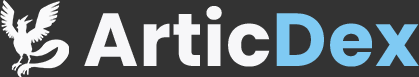
<style>
.page{position:relative;width:419px;height:77px;background:#333333}
.page>*{position:absolute;margin:0}
.t1{font:75px "Poppins-Bold";letter-spacing:0.01em}
</style>
<div class="page">
<p class="t1" style="left:84px;top:6px;width:335px;height:61px">ArticDex</p>
</div>
